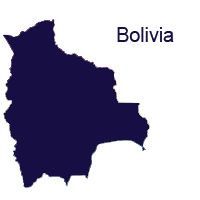
<style>
.page{position:relative;width:200px;height:200px;background:#ffffff}
.page>*{position:absolute;margin:0}
.t1{font:20.8px "ArialMT";color:#170f44;scale:0.94 1}
</style>
<div class="page">
<p class="t1" style="left:117px;top:27px;width:57px;height:15px">Bolivia</p>
</div>
